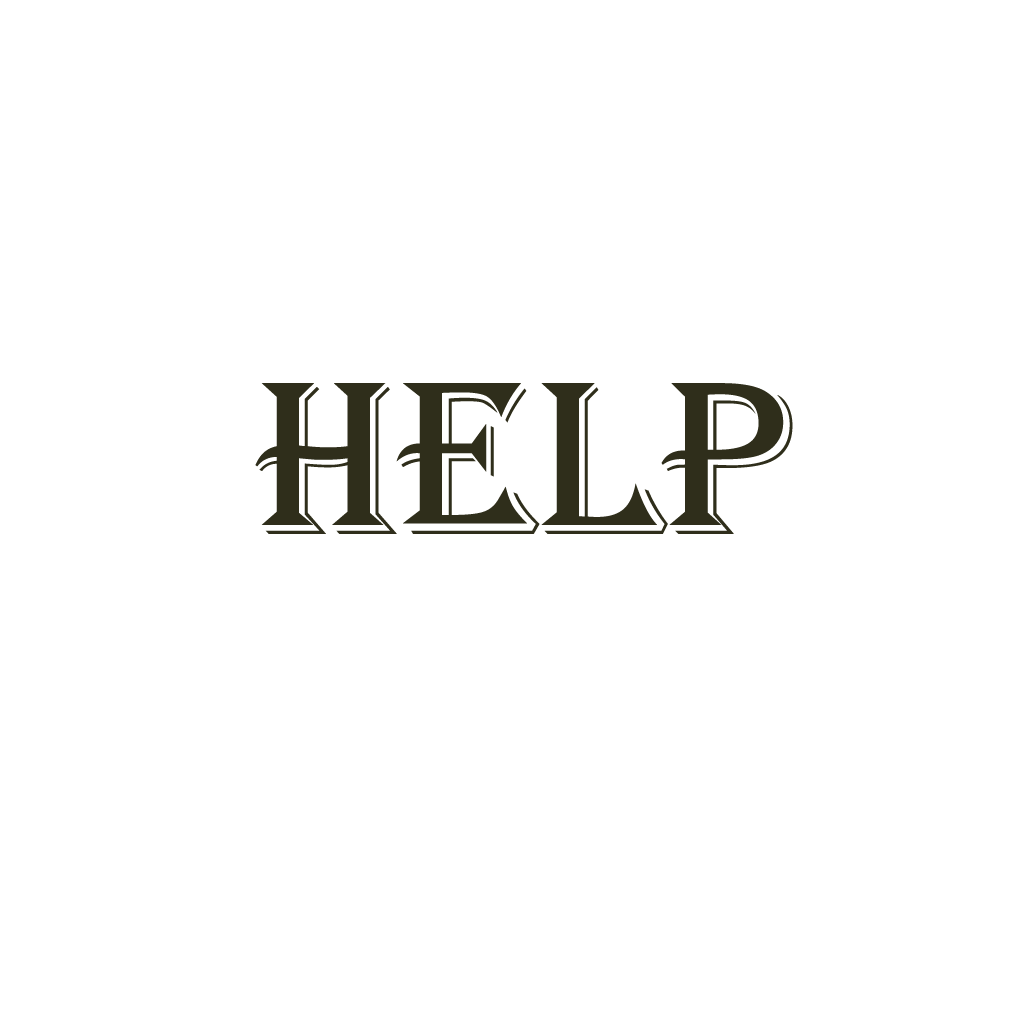
<style>
.page{position:relative;width:1024px;height:1024px;background:#ffffff}
.page>*{position:absolute;margin:0}
.t1{font:226px "Algerian";color:#333333}
</style>
<div class="page">
<p class="t1" style="left:255px;top:383px;width:538px;height:151px">HELP</p>
</div>
